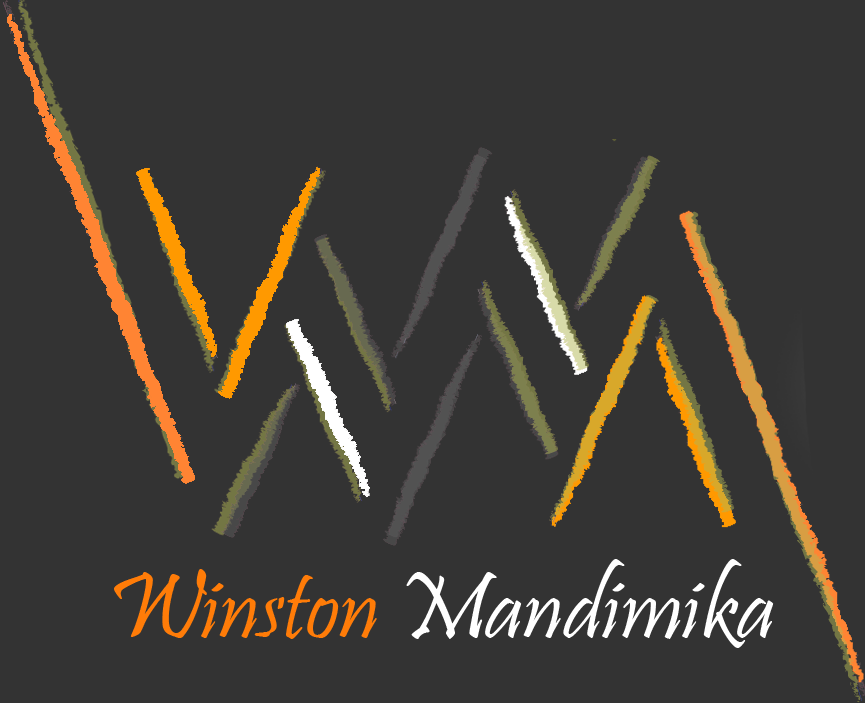
<style>
.page{position:relative;width:865px;height:703px;background:#333333}
.page>*{position:absolute;margin:0}
.t1{font:96.1px "Pristina-Regular";color:#ffffff}
.t2{font:96.1px "Pristina-Regular";color:#ff7c08}
</style>
<div class="page">
<p class="t1" style="left:114px;top:559px;width:660px;height:89px"><span class="t2">Winston </span>Mandimika</p>
</div>
